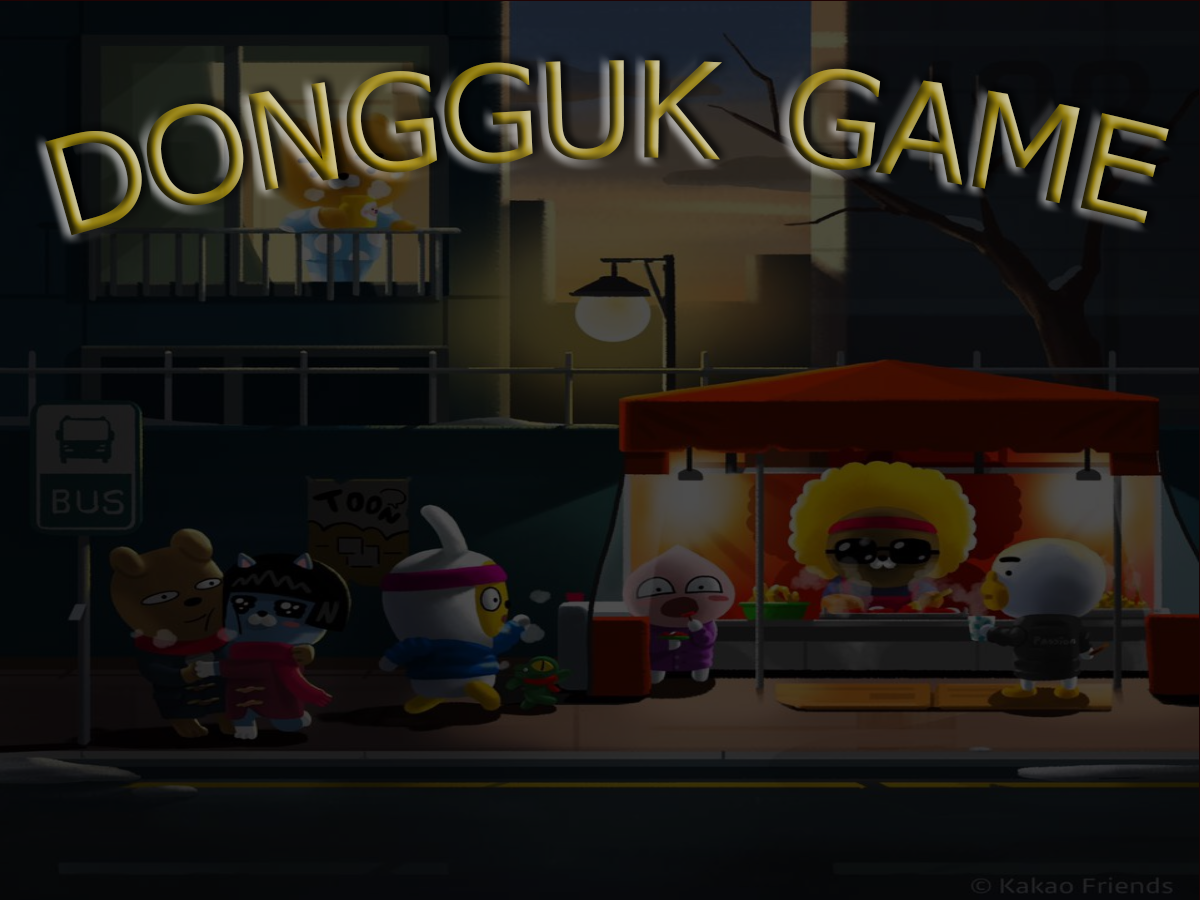
<style>
.page{position:relative;width:1200px;height:900px}
.page>*{position:absolute;margin:0}
.t1{font:192px "Tahoma";font-variant:small-caps}
</style>
<div class="page">
<p class="t1" style="left:44px;top:60px;width:1125px;height:176px">dongguk game</p>
</div>
